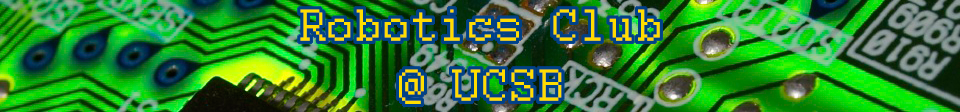
<style>
.page{position:relative;width:960px;height:112px}
.page>*{position:absolute;margin:0}
.t1{font:50px "Courier";color:#ffdd00}
</style>
<div class="page">
<p class="t1" style="left:300px;top:9px;width:360px;height:95px;text-align:center">Robotics Club<br>@ UCSB</p>
</div>
